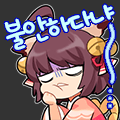
<style>
.page{position:relative;width:120px;height:120px;background:#333333}
.page>*{position:absolute;margin:0}
.t1{font:33.8px "777Kidbutterfly";letter-spacing:-0.14em;color:#ceffff}
</style>
<div class="page">
<p class="t1" style="left:4px;top:4px;width:111px;height:46px;rotate:-16deg">불안하다냐</p>
</div>
